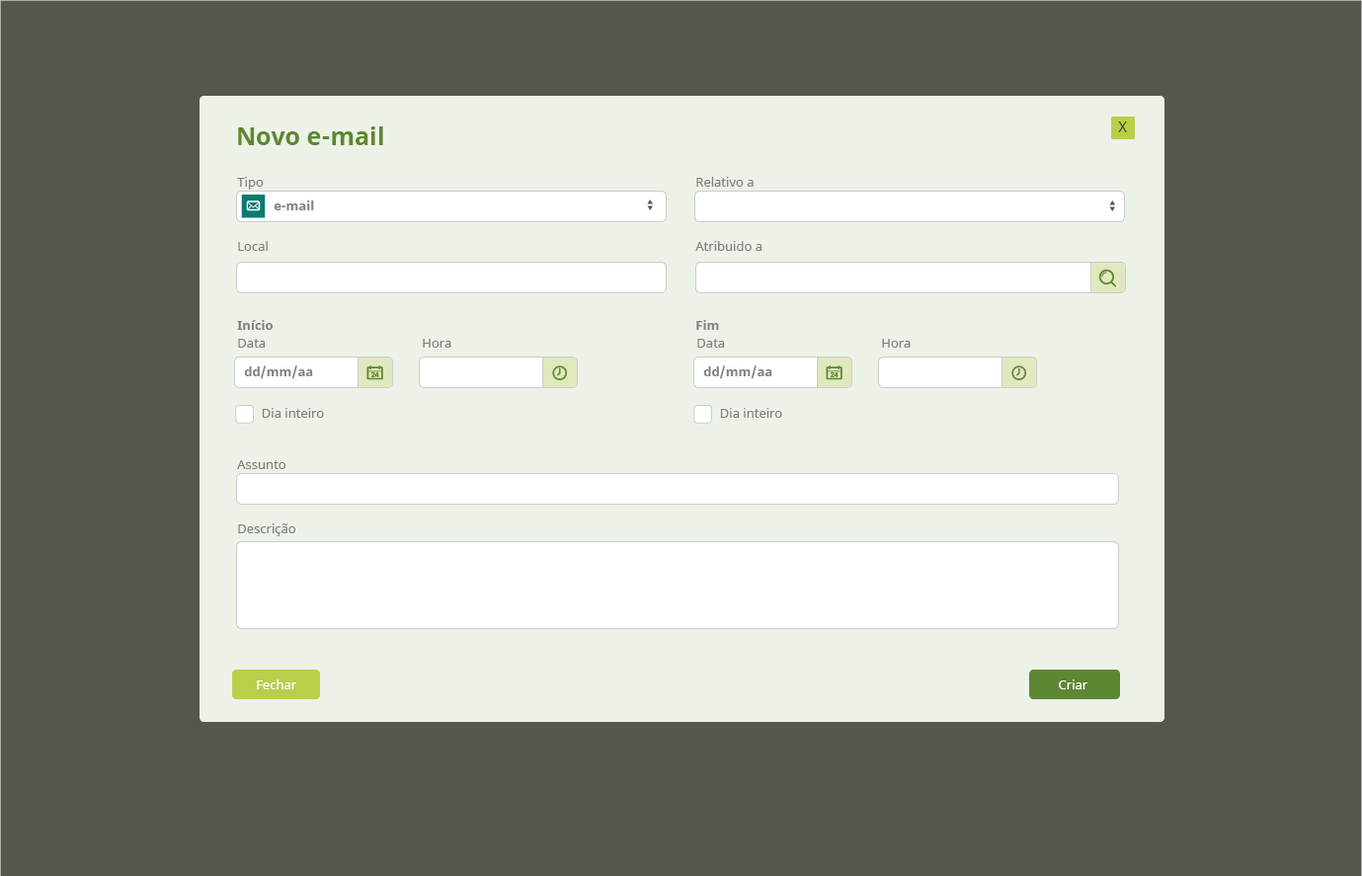
<style>
.page{position:relative;width:1362px;height:876px;background:#53584e}
.page>*{position:absolute;margin:0}
.t1{font:14.8px "NotoSans";color:#324a1a}
.t2{font:24.7px "NotoSans-Bold";color:#5d8730}
.t3{font:12.8px/64.2px "NotoSans";color:#808080}
.t4{font:12.8px/79px "NotoSans-Bold";color:#808080}
.t5{font:12.8px "NotoSans-Bold";color:#808080}
.t6{font:12.8px "NotoSans";color:#808080}
.t7{font:12.8px "NotoSans";color:#ffffff}
</style>
<div class="page">
<p class="t1" style="left:1118px;top:121px;width:9px;height:11px">X</p>
<p class="t2" style="left:238px;top:126px;width:145px;height:19px">Novo e-mail</p>
<p class="t3" style="left:237px;top:177px;width:36px;height:153px">Tipo<br>Local<br><span class="t4">Início</span></p>
<p class="t3" style="left:695px;top:177px;width:67px;height:153px">Relativo a<br>Atribuido a<br><span class="t4">Fim</span></p>
<p class="t5" style="left:273px;top:200px;width:41px;height:10px">e-mail</p>
<p class="t6" style="left:238px;top:339px;width:28px;height:9px">Data</p>
<p class="t6" style="left:423px;top:339px;width:28px;height:9px">Hora</p>
<p class="t6" style="left:697px;top:339px;width:28px;height:9px">Data</p>
<p class="t6" style="left:882px;top:339px;width:28px;height:9px">Hora</p>
<p class="t5" style="left:244px;top:365px;width:69px;height:14px">dd/mm/aa</p>
<p class="t5" style="left:703px;top:365px;width:69px;height:14px">dd/mm/aa</p>
<p class="t6" style="left:262px;top:408px;width:62px;height:10px">Dia inteiro</p>
<p class="t6" style="left:720px;top:408px;width:62px;height:10px">Dia inteiro</p>
<p class="t3" style="left:237px;top:460px;width:58px;height:76px">Assunto<br>Descrição</p>
<p class="t7" style="left:257px;top:679px;width:39px;height:10px">Fechar</p>
<p class="t7" style="left:1058px;top:679px;width:29px;height:10px">Criar</p>
</div>
